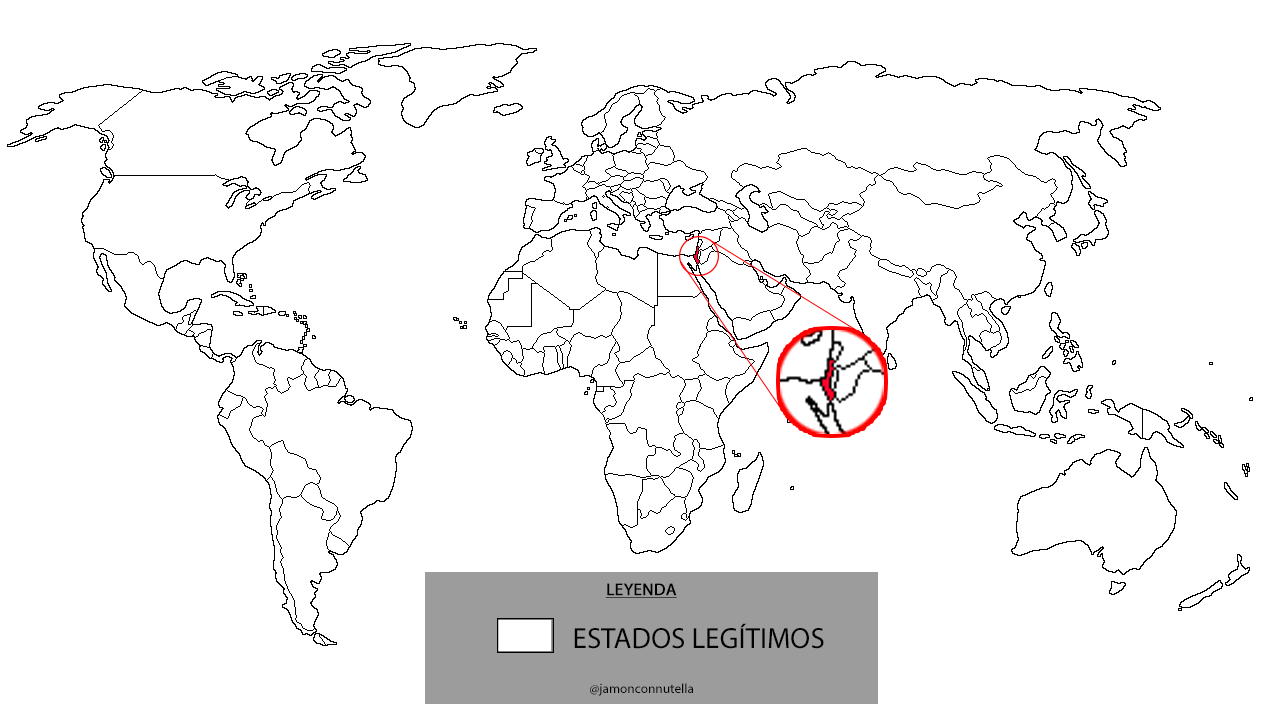
<style>
.page{position:relative;width:1264px;height:704px;background:#ffffff}
.page>*{position:absolute;margin:0}
.t1{font:17.2px "MyriadPro-Regular";color:#000000;font-weight:bold;text-decoration:underline}
.t2{font:29.2px "MyriadPro-Regular";color:#000000}
.t3{font:13.3px "MyriadPro-Regular";color:#000000}
</style>
<div class="page">
<p class="t1" style="left:605px;top:583px;width:72px;height:15px">LEYENDA</p>
<p class="t2" style="left:574px;top:623px;width:250px;height:26px">ESTADOS LEGÍTIMOS</p>
<p class="t3" style="left:590px;top:683px;width:103px;height:13px">@jamonconnutella</p>
</div>
